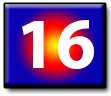
<style>
.page{position:relative;width:111px;height:96px;background:#ffffff}
.page>*{position:absolute;margin:0}
.t1{font:72px "MyriadPro-Bold";color:#ffffff}
</style>
<div class="page">
<p class="t1" style="left:22px;top:20px;width:72px;height:49px">16</p>
</div>
